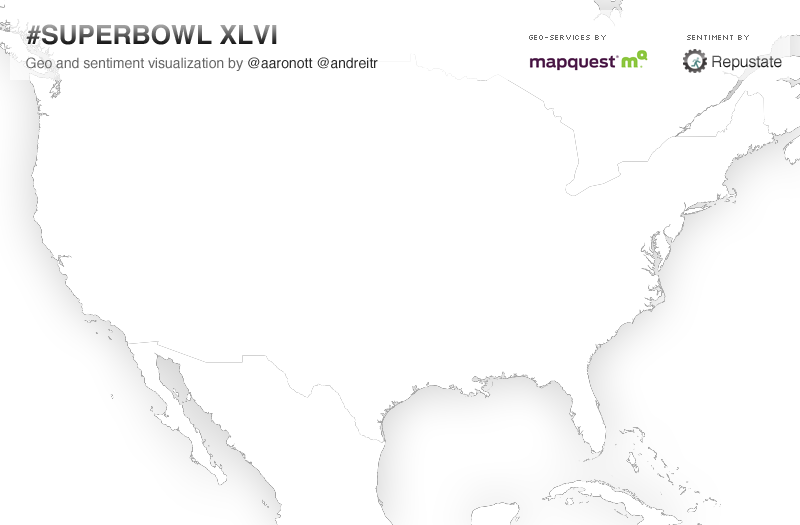
<style>
.page{position:relative;width:800px;height:525px;background:#ffffff}
.page>*{position:absolute;margin:0}
.t1{font:26.3px "Helvetica-Bold"}
.t2{font:8px "Silkscreen";color:#666666}
.t3{font:14px "Helvetica";color:#666666}
.t4{font:14px "Helvetica";color:#2b2b2b}
.t5{font:15.6px "Helvetica"}
</style>
<div class="page">
<p class="t1" style="left:26px;top:24px;width:251px;height:21px">#SUPERBOWL XLVI</p>
<p class="t2" style="left:529px;top:35px;width:77px;height:5px">GEO-SERVICES BY</p>
<p class="t2" style="left:687px;top:35px;width:62px;height:5px">SENTIMENT BY</p>
<p class="t3" style="left:26px;top:57px;width:352px;height:14px">Geo and sentiment visualization by <span class="t4">@aaronott @andreitr</span></p>
<p class="t5" style="left:712px;top:55px;width:70px;height:16px">Repustate</p>
</div>
